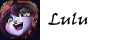
<style>
.page{position:relative;width:140px;height:40px;background:#ffffff}
.page>*{position:absolute;margin:0}
.t1{font:12px "VinerHandITC";color:#000000}
</style>
<div class="page">
<p class="t1" style="left:48px;top:12px;width:40px;height:13px">Lulu</p>
</div>
